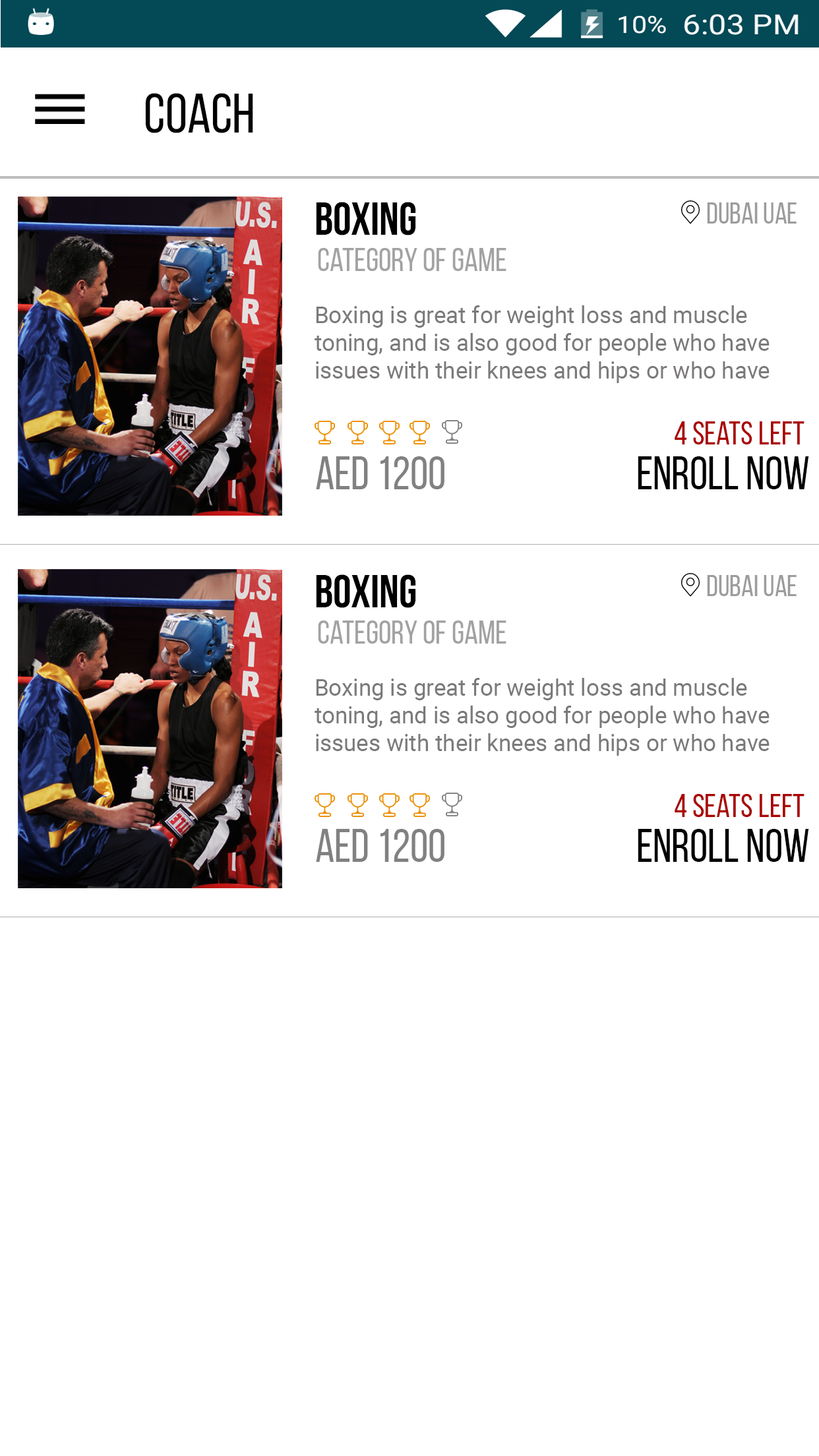
<style>
.page{position:relative;width:819px;height:1456px;background:#ffffff}
.page>*{position:absolute;margin:0}
.t1{font:56px "BebasNeueRegular";color:#010101}
.t2{font:46.2px "TestN-TestNBold";color:#000000}
.t3{font:29.7px "TestN-TestNRegular";color:#9d9c9c}
.t4{font:33px "TestN-TestNRegular";color:#a3a2a2}
.t5{font:23.1px "Roboto-Regular";color:#7b7979}
.t6{font:33px "BebasNeueRegular";color:#aa0505}
.t7{font:46.2px "TestN-TestNRegular";color:#828181}
.t8{font:46.2px "TestN-TestNRegular";color:#020202}
</style>
<div class="page">
<p class="t1" style="left:145px;top:93px;width:108px;height:40px">COACH</p>
<p class="t2" style="left:316px;top:202px;width:100px;height:33px">BOXING</p>
<p class="t3" style="left:707px;top:202px;width:90px;height:22px">DUBAI UAE</p>
<p class="t4" style="left:318px;top:248px;width:188px;height:23px">category of game</p>
<p class="t5" style="left:315px;top:305px;width:455px;height:78px">Boxing is great for weight loss and muscle <br>toning, and is also good for people who have <br>issues with their knees and hips or who have</p>
<p class="t6" style="left:675px;top:421px;width:129px;height:23px">4 seats left</p>
<p class="t7" style="left:316px;top:456px;width:128px;height:33px">AED 1200</p>
<p class="t8" style="left:638px;top:456px;width:171px;height:33px">ENROLL NOW</p>
<p class="t2" style="left:316px;top:574px;width:100px;height:34px">BOXING</p>
<p class="t3" style="left:707px;top:575px;width:90px;height:21px">DUBAI UAE</p>
<p class="t4" style="left:318px;top:621px;width:188px;height:23px">category of game</p>
<p class="t5" style="left:315px;top:678px;width:455px;height:78px">Boxing is great for weight loss and muscle <br>toning, and is also good for people who have <br>issues with their knees and hips or who have</p>
<p class="t6" style="left:675px;top:794px;width:129px;height:23px">4 seats left</p>
<p class="t7" style="left:316px;top:829px;width:128px;height:33px">AED 1200</p>
<p class="t8" style="left:638px;top:829px;width:171px;height:33px">ENROLL NOW</p>
</div>
